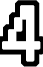
<style>
.page{position:relative;width:43px;height:67px;background:#ffffff}
.page>*{position:absolute;margin:0}
.t1{font:72px "Cubic_11";letter-spacing:0.1em;color:#ffffff;font-weight:bold}
</style>
<div class="page">
<p class="t1" style="left:2px;top:5px;width:39px;height:57px">4</p>
</div>
